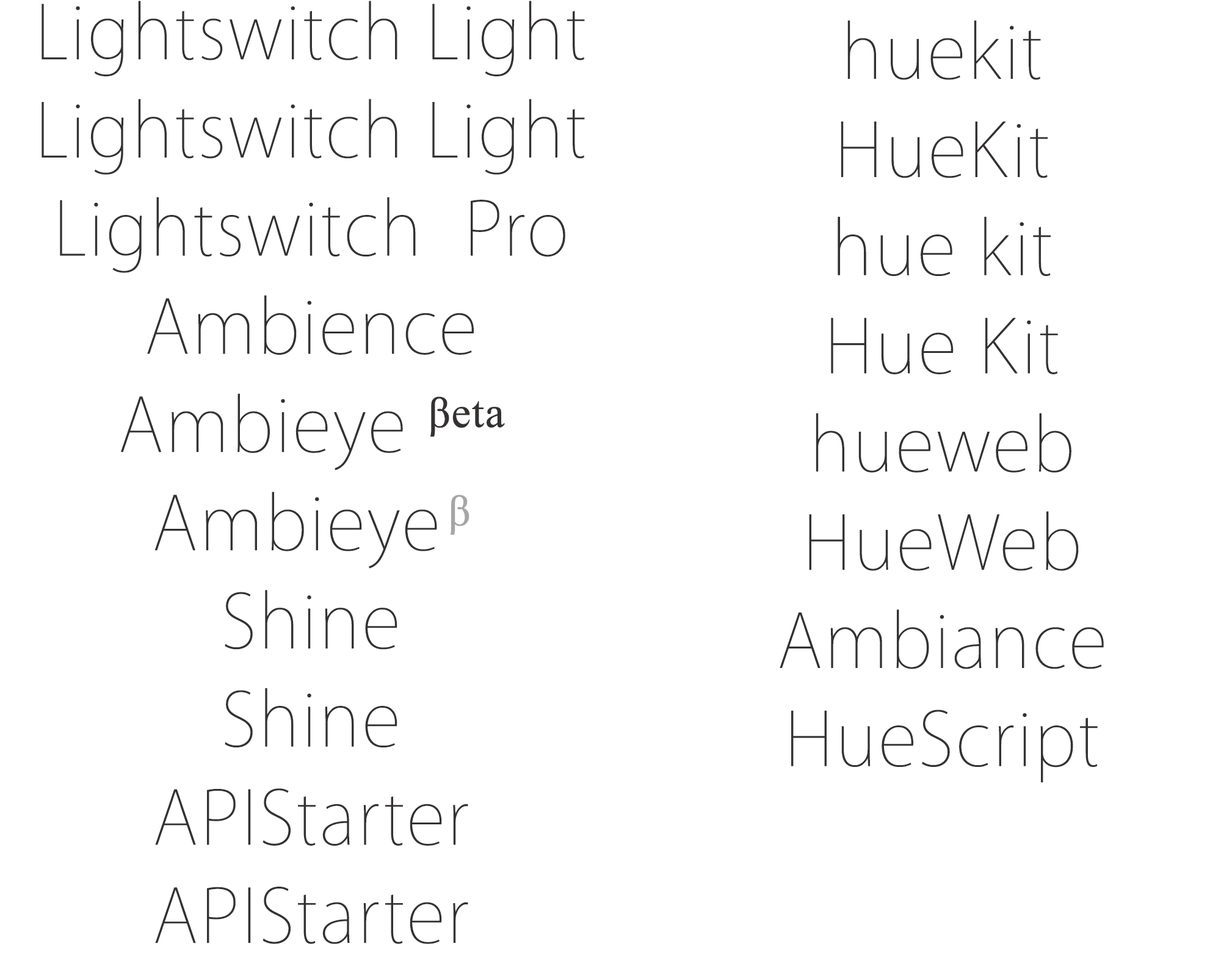
<style>
.page{position:relative;width:1221px;height:977px;background:#ffffff}
.page>*{position:absolute;margin:0}
.t1{font:81.8px "MyriadSetPro-Ultralight";color:#343131;font-weight:bold}
.t2{font:74.5px "TimesNewRomanPSMT";color:#343131;font-weight:bold}
.t3{font:74.5px "TimesNewRomanPSMT";color:#a6a6a6;font-weight:bold}
</style>
<div class="page">
<p class="t1" style="left:42px;top:1px;width:543px;height:943px;text-align:center">Lightswitch Light<br>Lightswitch Light<br>Lightswitch  Pro<br>Ambience<br>Ambieye <span class="t2">βeta<br></span>Ambieye <span class="t3">β<br></span>Shine<br>Shine<br>APIStarter<br>APIStarter</p>
<p class="t1" style="left:780px;top:20px;width:324px;height:763px;text-align:center">huekit<br>HueKit<br>hue kit<br>Hue Kit<br>hueweb<br>HueWeb<br>Ambiance<br>HueScript</p>
</div>
